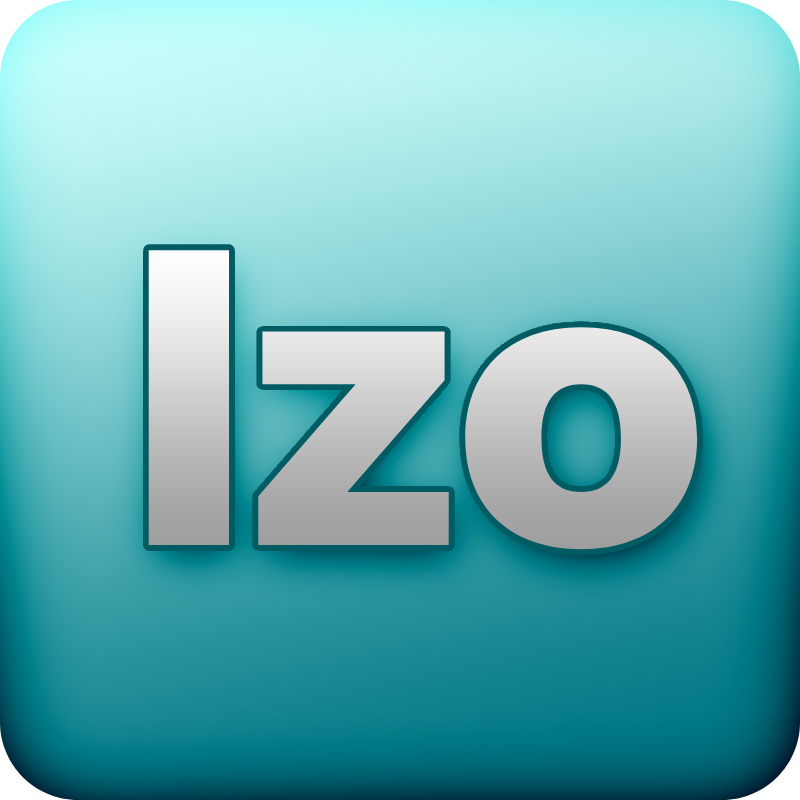
<style>
.page{position:relative;width:800px;height:800px}
.page>*{position:absolute;margin:0}
.t1{font:414px "CreatoDisplay-Black"}
</style>
<div class="page">
<p class="t1" style="left:148px;top:250px;width:550px;height:300px">Izo</p>
</div>
